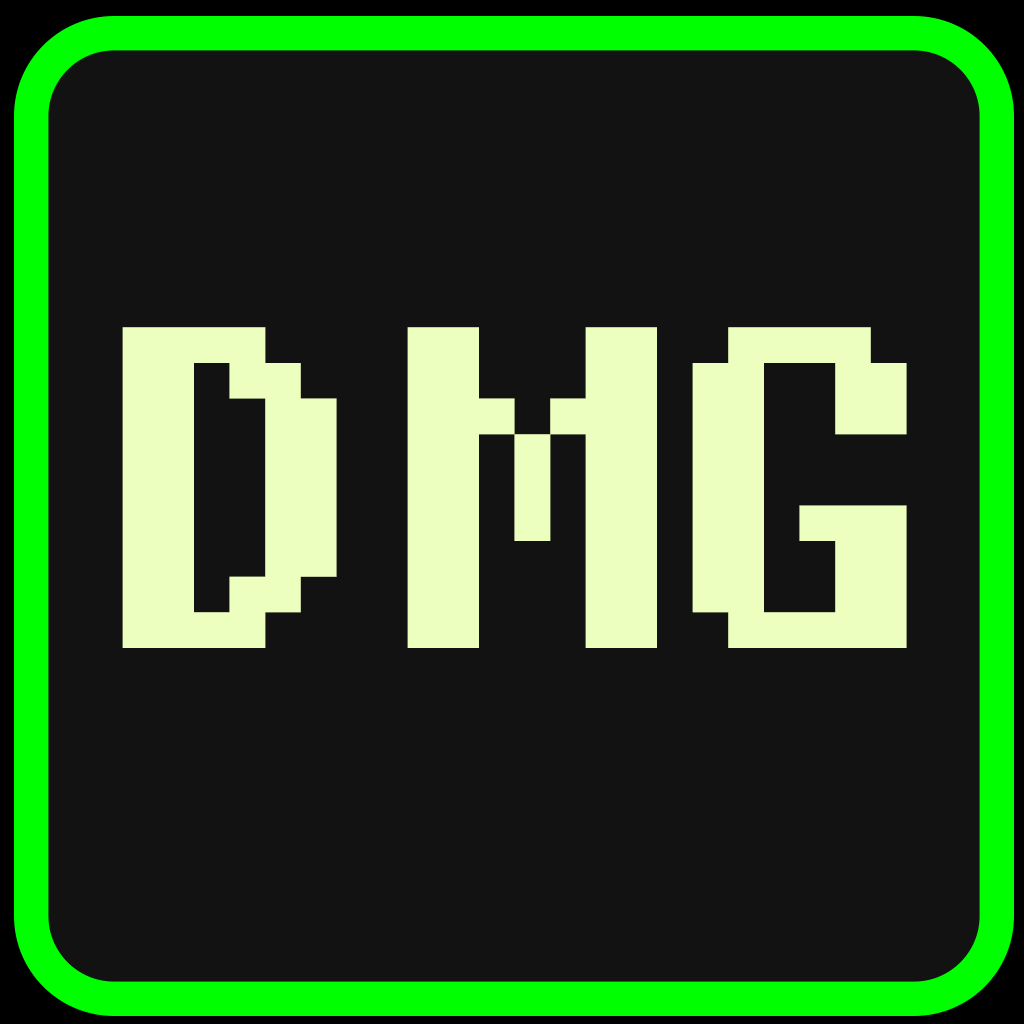
<style>
.page{position:relative;width:1024px;height:1024px;background:#121212}
.page>*{position:absolute;margin:0}
.t1{font:456px "Fixedsys";color:#ecffbe}
</style>
<div class="page">
<p class="t1" style="left:122px;top:327px;width:785px;height:321px">DMG</p>
</div>
